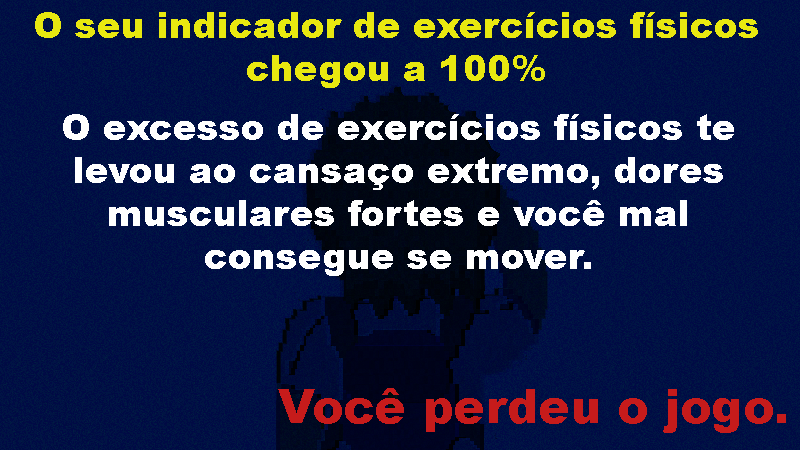
<style>
.page{position:relative;width:800px;height:450px}
.page>*{position:absolute;margin:0}
.t1{font:36px "Arial-Black";color:#e8e810}
.t2{font:36px "Arial-Black";color:#ffffff}
.t3{font:47.2px "Arial-Black";color:#c61b1b}
</style>
<div class="page">
<p class="t1" style="left:35px;top:12px;width:723px;height:76px;text-align:center">O seu indicador de exercícios físicos  chegou a 100%</p>
<p class="t2" style="left:63px;top:114px;width:671px;height:162px;text-align:center">O excesso de exercícios físicos te levou ao cansaço extremo, dores musculares fortes e você mal consegue se mover.</p>
<p class="t3" style="left:278px;top:388px;width:508px;height:45px">Você perdeu o jogo.</p>
</div>
